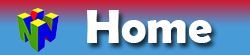
<style>
.page{position:relative;width:250px;height:55px;background:#479bd7}
.page>*{position:absolute;margin:0}
.t1{font:47.9px "BerlinSansFBDemi-Bold";color:#ffffff}
</style>
<div class="page">
<p class="t1" style="left:87px;top:10px;width:125px;height:33px">Home</p>
</div>
